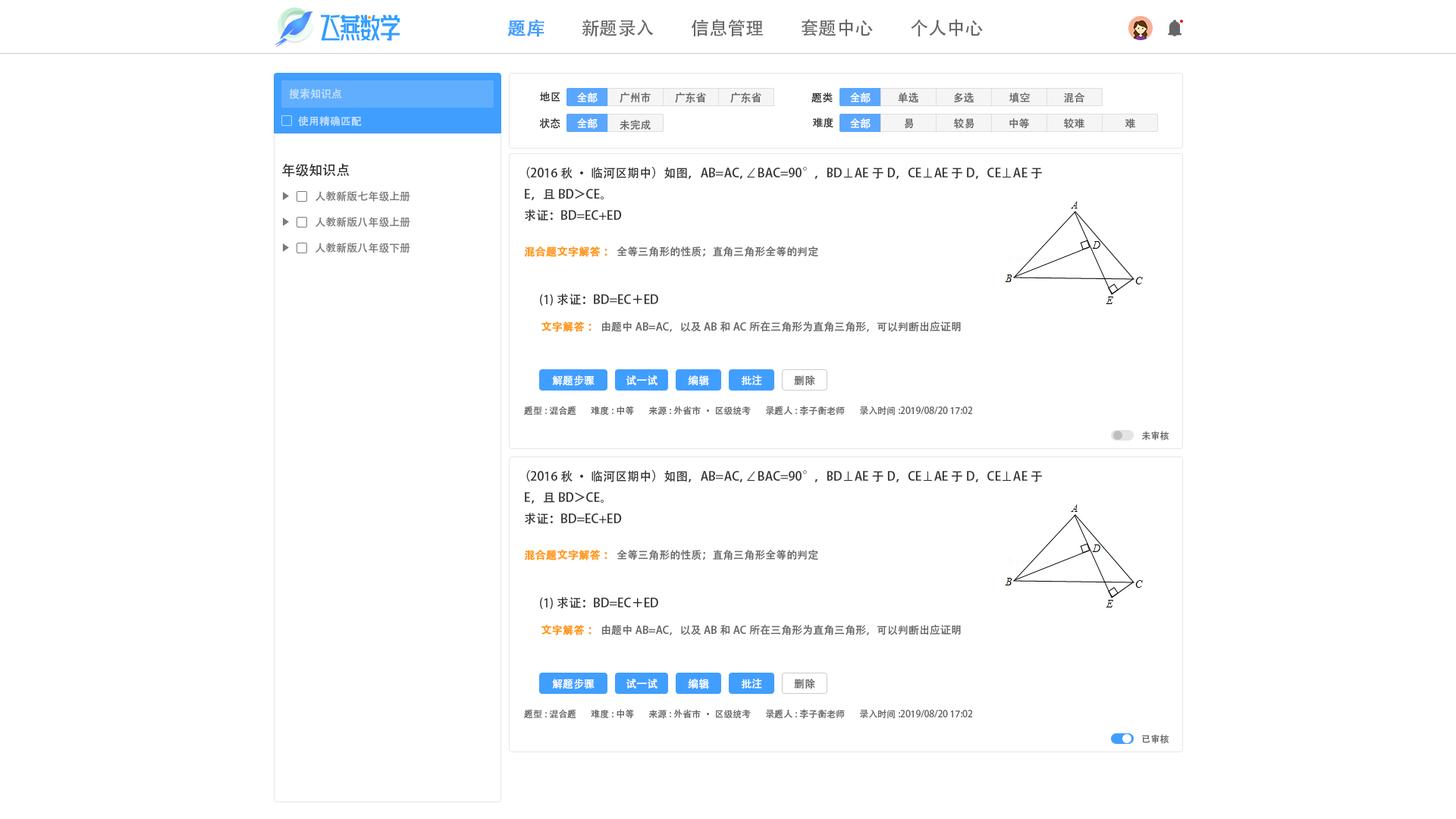
<style>
.page{position:relative;width:1456px;height:819px;background:#ffffff}
.page>*{position:absolute;margin:0}
.t1{font:18.2px "AdobeHeitiStd-Regular";color:#409eff;font-weight:bold}
.t2{font:18.2px "AdobeHeitiStd-Regular";color:#666666}
.t3{font:10.6px "AdobeHeitiStd-Regular";color:#c3e0ff}
.t4{font:10.6px "AdobeHeitiStd-Regular";color:#333333}
.t5{font:10.6px "AdobeHeitiStd-Regular";color:#ffffff}
.t6{font:10.6px "AdobeHeitiStd-Regular";color:#666666}
.t7{font:13.6px "AdobeHeitiStd-Regular";color:#333333}
.t8{font:12.1px "AdobeHeitiStd-Regular";color:#333333}
.t9{font:10.6px "AdobeHeitiStd-Regular";color:#7b7b7b}
.t10{font:10.6px "AdobeHeitiStd-Regular";color:#ff9814;font-weight:bold}
.t11{font:9.1px "AdobeHeitiStd-Regular";color:#666666}
</style>
<div class="page">
<p class="t1" style="left:507px;top:20px;width:37px;height:17px">题库</p>
<p class="t2" style="left:582px;top:20px;width:72px;height:16px">新题录入</p>
<p class="t2" style="left:691px;top:19px;width:72px;height:18px">信息管理</p>
<p class="t2" style="left:802px;top:19px;width:71px;height:17px">套题中心</p>
<p class="t2" style="left:911px;top:19px;width:72px;height:17px">个人中心</p>
<p class="t3" style="left:289px;top:88px;width:53px;height:11px">搜索知识点</p>
<p class="t4" style="left:540px;top:92px;width:20px;height:10px">地区</p>
<p class="t5" style="left:577px;top:93px;width:21px;height:10px">全部</p>
<p class="t6" style="left:620px;top:92px;width:31px;height:11px">广州市</p>
<p class="t6" style="left:675px;top:92px;width:31px;height:11px">广东省</p>
<p class="t6" style="left:730px;top:92px;width:31px;height:11px">广东省</p>
<p class="t4" style="left:811px;top:93px;width:22px;height:10px">题类</p>
<p class="t5" style="left:850px;top:93px;width:21px;height:10px">全部</p>
<p class="t6" style="left:898px;top:92px;width:20px;height:11px">单选</p>
<p class="t6" style="left:954px;top:92px;width:20px;height:10px">多选</p>
<p class="t6" style="left:1009px;top:93px;width:21px;height:10px">填空</p>
<p class="t6" style="left:1064px;top:93px;width:21px;height:10px">混合</p>
<p class="t3" style="left:298px;top:116px;width:64px;height:11px">使用精确匹配</p>
<p class="t4" style="left:539px;top:118px;width:21px;height:11px">状态</p>
<p class="t5" style="left:577px;top:118px;width:21px;height:11px">全部</p>
<p class="t6" style="left:620px;top:120px;width:31px;height:10px">未完成</p>
<p class="t4" style="left:813px;top:118px;width:20px;height:10px">难度</p>
<p class="t5" style="left:850px;top:118px;width:21px;height:11px">全部</p>
<p class="t6" style="left:904px;top:118px;width:10px;height:11px">易</p>
<p class="t6" style="left:954px;top:118px;width:20px;height:11px">较易</p>
<p class="t6" style="left:1009px;top:118px;width:20px;height:10px">中等</p>
<p class="t6" style="left:1064px;top:118px;width:21px;height:11px">较难</p>
<p class="t6" style="left:1125px;top:118px;width:11px;height:11px">难</p>
<p class="t7" style="left:282px;top:163px;width:68px;height:14px">年级知识点</p>
<p class="t8" style="left:525px;top:167px;width:517px;height:54px">（2016秋·临河区期中）如图，AB=AC，∠BAC=90°，BD⊥AE于D，CE⊥AE于D，CE⊥AE于E，且BD＞CE。<br>求证：BD=EC+ED</p>
<p class="t9" style="left:315px;top:191px;width:95px;height:11px">人教新版七年级上册</p>
<p class="t9" style="left:315px;top:217px;width:95px;height:10px">人教新版八年级上册</p>
<p class="t9" style="left:315px;top:243px;width:95px;height:10px">人教新版八年级下册</p>
<p class="t6" style="left:524px;top:246px;width:294px;height:11px"><span class="t10">混合题文字解答：</span>全等三角形的性质；直角三角形全等的判定</p>
<p class="t8" style="left:540px;top:293px;width:118px;height:13px">(1)求证：BD=EC＋ED</p>
<p class="t6" style="left:541px;top:321px;width:420px;height:11px"><span class="t10">文字解答：</span>由题中AB=AC，以及AB和AC所在三角形为直角三角形，可以判断出应证明</p>
<p class="t5" style="left:552px;top:375px;width:43px;height:11px">解题步骤</p>
<p class="t5" style="left:626px;top:375px;width:31px;height:10px">试一试</p>
<p class="t5" style="left:688px;top:375px;width:21px;height:11px">编辑</p>
<p class="t5" style="left:741px;top:375px;width:21px;height:10px">批注</p>
<p class="t6" style="left:794px;top:375px;width:21px;height:10px">删除</p>
<p class="t11" style="left:524px;top:406px;width:52px;height:9px">题型:混合题</p>
<p class="t11" style="left:591px;top:406px;width:43px;height:9px">难度:中等</p>
<p class="t11" style="left:648px;top:406px;width:103px;height:10px">来源:外省市·区级统考</p>
<p class="t11" style="left:766px;top:406px;width:79px;height:10px">录题人:李子衡老师</p>
<p class="t11" style="left:860px;top:406px;width:113px;height:10px">录入时间:2019/08/20 17:02</p>
<p class="t11" style="left:1142px;top:431px;width:27px;height:10px">未审核</p>
<p class="t8" style="left:525px;top:470px;width:517px;height:55px">（2016秋·临河区期中）如图，AB=AC，∠BAC=90°，BD⊥AE于D，CE⊥AE于D，CE⊥AE于E，且BD＞CE。<br>求证：BD=EC+ED</p>
<p class="t6" style="left:524px;top:549px;width:294px;height:11px"><span class="t10">混合题文字解答：</span>全等三角形的性质；直角三角形全等的判定</p>
<p class="t8" style="left:540px;top:597px;width:118px;height:12px">(1)求证：BD=EC＋ED</p>
<p class="t6" style="left:541px;top:624px;width:420px;height:11px"><span class="t10">文字解答：</span>由题中AB=AC，以及AB和AC所在三角形为直角三角形，可以判断出应证明</p>
<p class="t5" style="left:741px;top:678px;width:21px;height:11px">批注</p>
<p class="t5" style="left:552px;top:679px;width:43px;height:10px">解题步骤</p>
<p class="t5" style="left:626px;top:679px;width:31px;height:10px">试一试</p>
<p class="t5" style="left:688px;top:679px;width:21px;height:10px">编辑</p>
<p class="t6" style="left:794px;top:679px;width:21px;height:10px">删除</p>
<p class="t11" style="left:524px;top:709px;width:52px;height:9px">题型:混合题</p>
<p class="t11" style="left:591px;top:709px;width:43px;height:9px">难度:中等</p>
<p class="t11" style="left:648px;top:709px;width:103px;height:10px">来源:外省市·区级统考</p>
<p class="t11" style="left:766px;top:709px;width:79px;height:10px">录题人:李子衡老师</p>
<p class="t11" style="left:860px;top:709px;width:113px;height:10px">录入时间:2019/08/20 17:02</p>
<p class="t11" style="left:1142px;top:734px;width:27px;height:10px">已审核</p>
</div>
